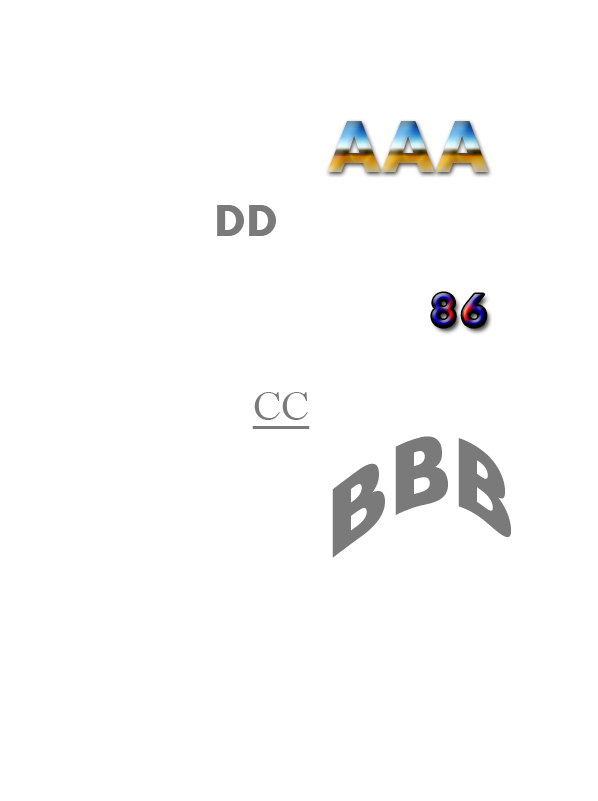
<style>
.page{position:relative;width:598px;height:801px;background:#ffffff}
.page>*{position:absolute;margin:0}
.t1{font:76px "Aharoni-Bold"}
.t2{font:46px "Aharoni-Bold";color:#7a7a7a}
.t3{font:72px "Aharoni-Bold"}
.t4{font:42px "David";color:#7a7a7a;text-decoration:underline}
.t5{font:102px "Aharoni-Bold";color:#7a7a7a}
</style>
<div class="page">
<p class="t1" style="left:327px;top:121px;width:162px;height:51px">AAA</p>
<p class="t2" style="left:217px;top:205px;width:59px;height:31px">DD</p>
<p class="t3" style="left:431px;top:293px;width:55px;height:34px">86</p>
<p class="t4" style="left:252px;top:392px;width:58px;height:37px">CC</p>
<p class="t5" style="left:332px;top:436px;width:179px;height:122px">BBB</p>
</div>
